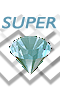
<style>
.page{position:relative;width:60px;height:90px;background:#ffffff}
.page>*{position:absolute;margin:0}
.t1{font:16px "GillSansMT";color:#5894ae;font-weight:bold;font-style:italic;scale:1.18 1}
</style>
<div class="page">
<p class="t1" style="left:2px;top:16px;width:55px;height:13px">SUPER</p>
</div>
